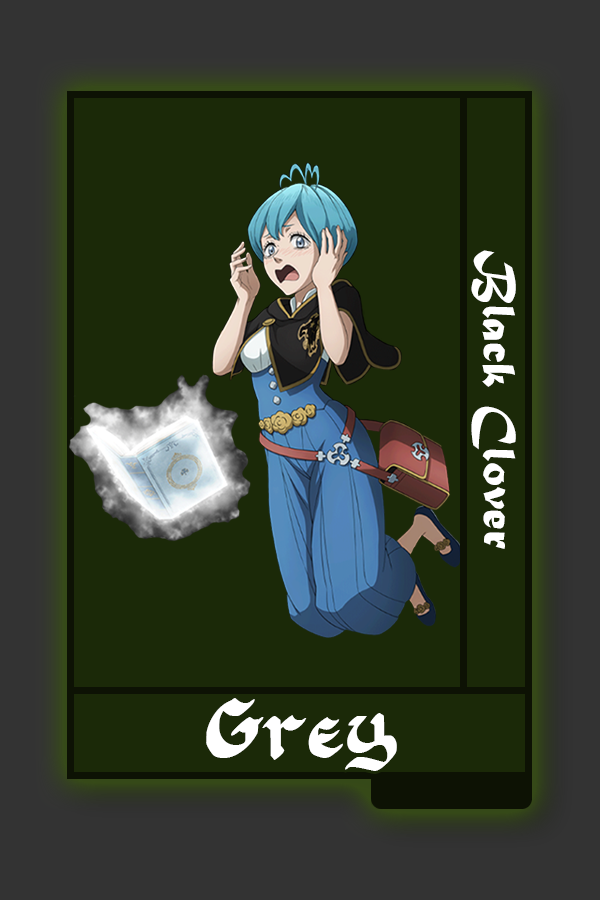
<style>
.page{position:relative;width:600px;height:900px;background:#1b2908}
.page>*{position:absolute;margin:0}
.t1{font:48.8px "MaturaMTScriptCapitals";color:#ffffff}
.t2{font:69.5px "FloranteatLaura";color:#ffffff}
</style>
<div class="page">
<p class="t1" style="left:471px;top:250px;width:45px;height:299px;rotate:90deg">Black Clover</p>
<p class="t2" style="left:206px;top:698px;width:191px;height:73px">Grey</p>
</div>
